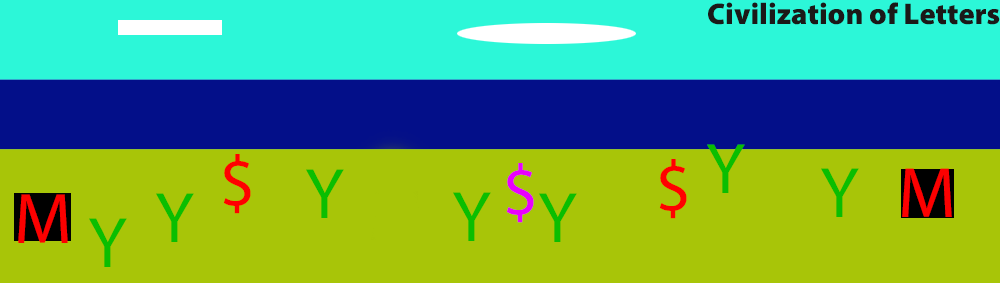
<style>
.page{position:relative;width:1000px;height:283px;background:#a8c508}
.page>*{position:absolute;margin:0}
.t1{font:30px "MyriadPro-Black";color:#1b1918}
.t2{font:72px "MyriadPro-Regular";color:#0abe01}
.t3{font:72px "MyriadPro-Regular";color:#ff0000}
.t4{font:72px "MyriadPro-Regular";color:#e900fe}
.t5{font:72px "MyriadPro-Regular";color:#fc0000}
</style>
<div class="page">
<p class="t1" style="left:708px;top:2px;width:292px;height:23px">Civilization of Letters</p>
<p class="t2" style="left:707px;top:144px;width:38px;height:49px">Y</p>
<p class="t3" style="left:223px;top:154px;width:28px;height:60px">$</p>
<p class="t3" style="left:659px;top:159px;width:28px;height:60px">$</p>
<p class="t2" style="left:306px;top:169px;width:38px;height:49px">Y</p>
<p class="t4" style="left:506px;top:163px;width:28px;height:60px">$</p>
<p class="t2" style="left:821px;top:168px;width:38px;height:49px">Y</p>
<p class="t5" style="left:902px;top:168px;width:50px;height:49px">M</p>
<p class="t5" style="left:18px;top:194px;width:50px;height:49px">M</p>
<p class="t2" style="left:156px;top:193px;width:38px;height:49px">Y</p>
<p class="t2" style="left:453px;top:192px;width:38px;height:49px">Y</p>
<p class="t2" style="left:539px;top:193px;width:38px;height:49px">Y</p>
<p class="t2" style="left:89px;top:218px;width:38px;height:49px">Y</p>
</div>
